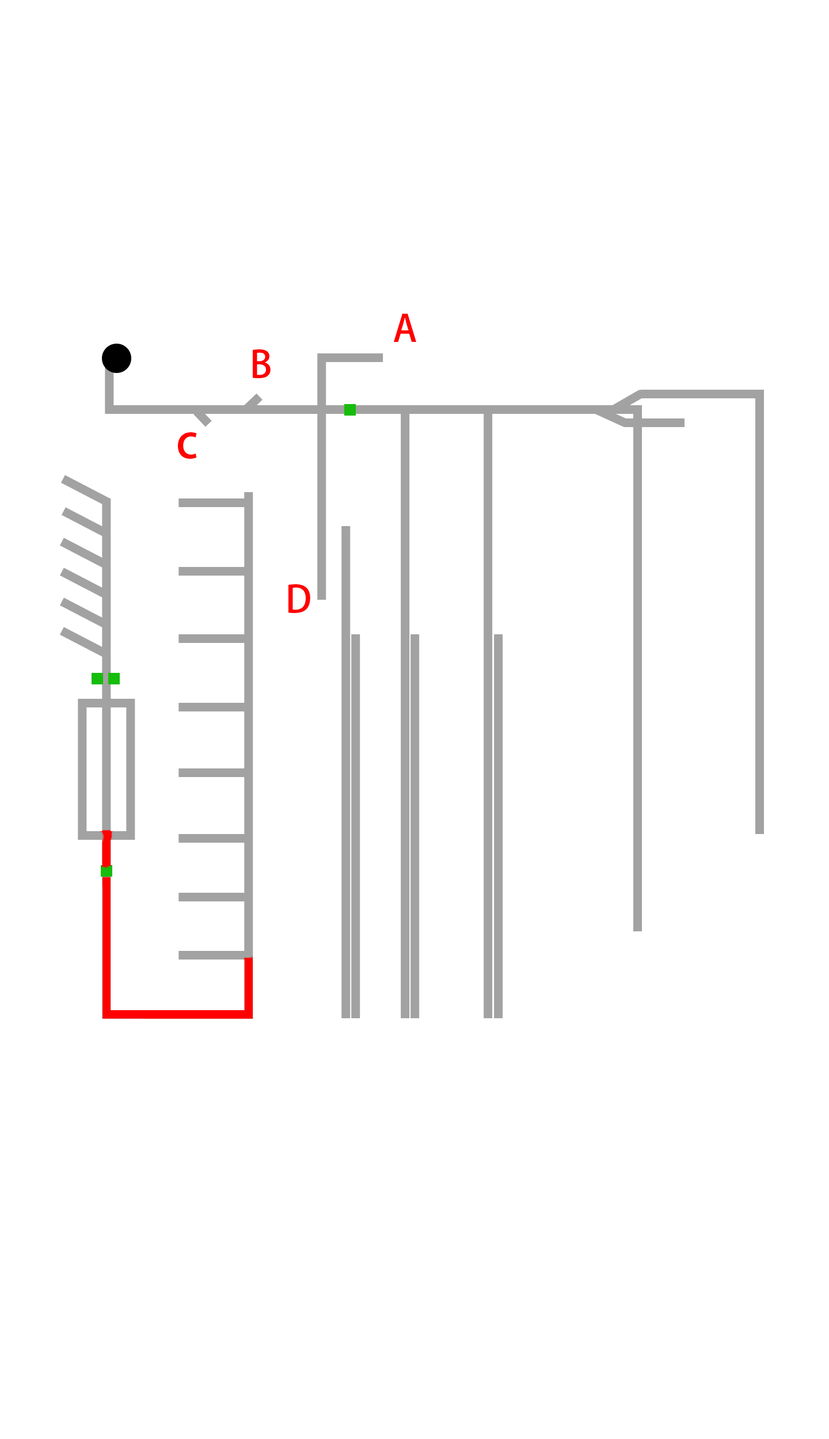
<style>
.page{position:relative;width:829px;height:1439px;background:#ffffff}
.page>*{position:absolute;margin:0}
.t1{font:36.8px "AdobeHeitiStd-Regular";color:#ff0000}
.t2{font:46px "AdobeHeitiStd-Regular";color:#ff0000}
</style>
<div class="page">
<p class="t1" style="left:394px;top:314px;width:22px;height:28px">A</p>
<p class="t1" style="left:253px;top:349px;width:17px;height:29px">B</p>
<p class="t2" style="left:178px;top:432px;width:19px;height:27px">c</p>
<p class="t1" style="left:288px;top:584px;width:22px;height:29px">D</p>
</div>
